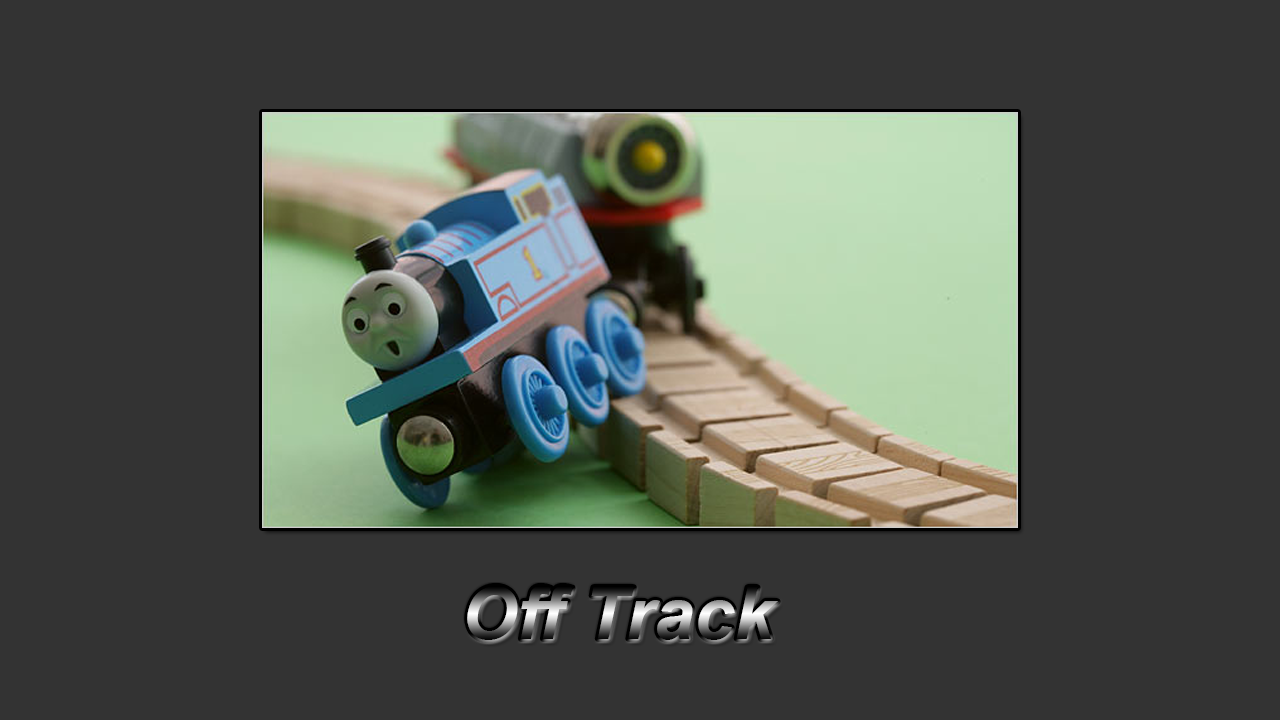
<style>
.page{position:relative;width:1280px;height:720px;background:#333333}
.page>*{position:absolute;margin:0}
.t1{font:72px "Arial-BoldItalicMT"}
</style>
<div class="page">
<p class="t1" style="left:467px;top:586px;width:311px;height:54px">Off Track</p>
</div>
